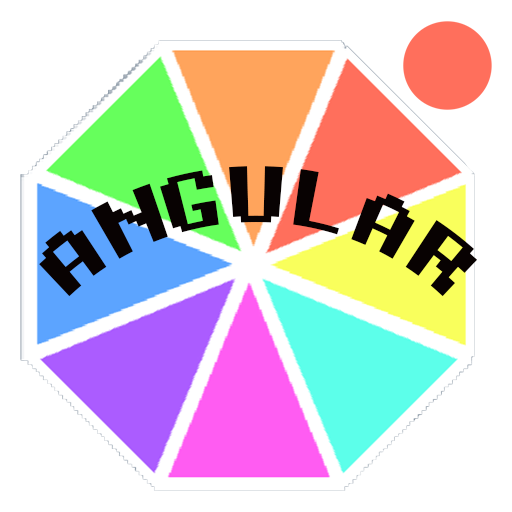
<style>
.page{position:relative;width:512px;height:512px;background:#ffffff}
.page>*{position:absolute;margin:0}
.t1{font:99.9px "DungGeunMo";color:#080202}
</style>
<div class="page">
<p class="t1" style="left:39px;top:166px;width:438px;height:131px">ANGULAR</p>
</div>
